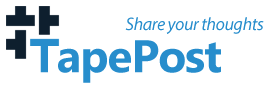
<style>
.page{position:relative;width:264px;height:86px;background:#ffffff}
.page>*{position:absolute;margin:0}
.t1{font:18px "MyriadPro-It";letter-spacing:-0.023em;color:#278dcc}
.t2{font:45.7px "MicrosoftTaiLe-Bold";letter-spacing:-0.023em;color:#278dcc}
</style>
<div class="page">
<p class="t1" style="left:125px;top:17px;width:139px;height:17px">Share your thoughts</p>
<p class="t2" style="left:31px;top:40px;width:190px;height:43px">TapePost</p>
</div>
